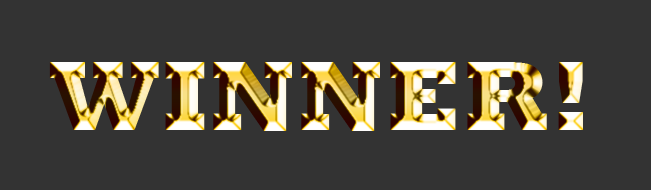
<style>
.page{position:relative;width:651px;height:190px;background:#333333}
.page>*{position:absolute;margin:0}
.t1{font:100px "Rockwell-ExtraBold";letter-spacing:0.025em}
</style>
<div class="page">
<p class="t1" style="left:49px;top:62px;width:534px;height:69px">WINNER!</p>
</div>
